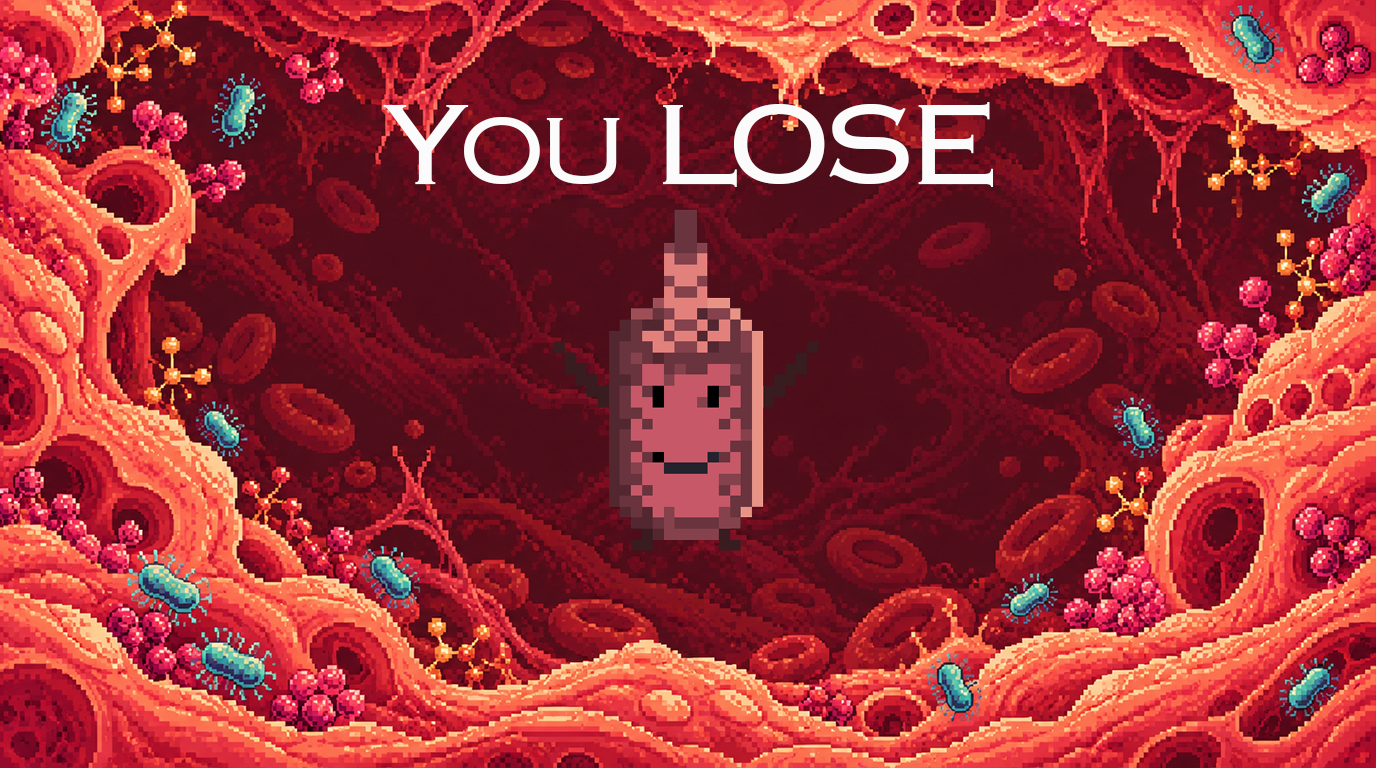
<style>
.page{position:relative;width:1376px;height:768px}
.page>*{position:absolute;margin:0}
.t1{font:150px "Copperplate-Light";letter-spacing:-0.1em;color:#fbfbfb}
</style>
<div class="page">
<p class="t1" style="left:383px;top:102px;width:610px;height:85px">You LOSE</p>
</div>
